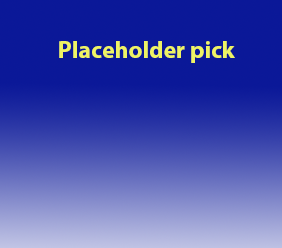
<style>
.page{position:relative;width:282px;height:248px;background:#0b1898}
.page>*{position:absolute;margin:0}
.t1{font:24px "MyriadPro-Bold";color:#eef364}
</style>
<div class="page">
<p class="t1" style="left:59px;top:41px;width:176px;height:22px">Placeholder pick</p>
</div>
